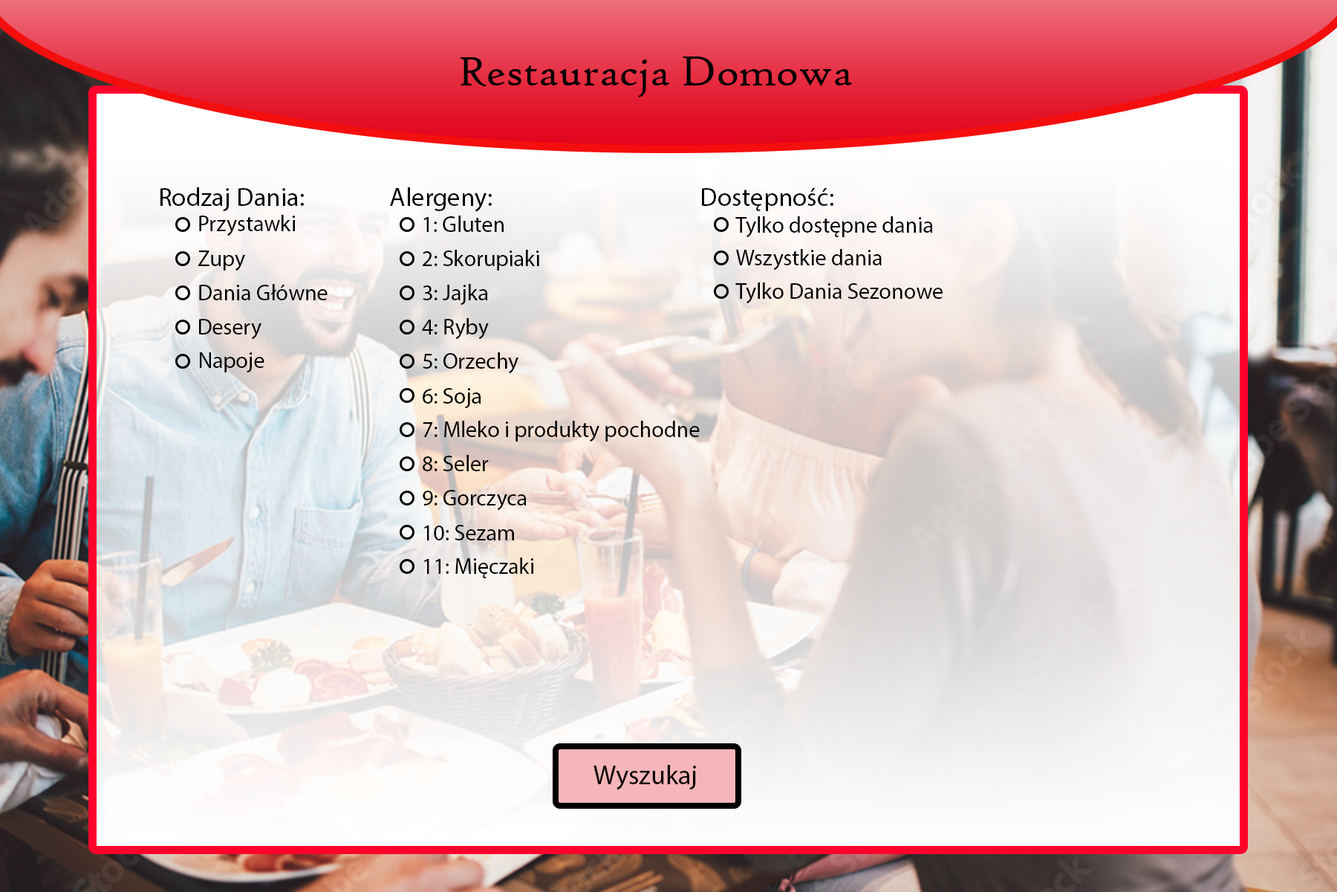
<style>
.page{position:relative;width:1337px;height:892px}
.page>*{position:absolute;margin:0}
.t1{font:44.6px "HighTowerText-Reg";color:#000000}
.t2{font:26px "MyriadPro-Regular";color:#000000}
.t3{font:22.3px "MyriadPro-Regular";color:#000000}
.t4{font:26.7px "MyriadPro-Regular";color:#010000}
</style>
<div class="page">
<p class="t1" style="left:460px;top:56px;width:392px;height:41px">Restauracja Domowa</p>
<p class="t2" style="left:160px;top:187px;width:144px;height:24px">Rodzaj Dania:</p>
<p class="t2" style="left:390px;top:187px;width:102px;height:25px">Alergeny:</p>
<p class="t2" style="left:702px;top:188px;width:132px;height:23px">Dostępność:</p>
<p class="t3" style="left:199px;top:215px;width:96px;height:21px">Przystawki</p>
<p class="t3" style="left:424px;top:215px;width:80px;height:17px">1: Gluten</p>
<p class="t3" style="left:736px;top:216px;width:197px;height:22px">Tylko dostępne dania</p>
<p class="t3" style="left:198px;top:250px;width:47px;height:21px">Zupy</p>
<p class="t3" style="left:423px;top:250px;width:116px;height:20px">2: Skorupiaki</p>
<p class="t3" style="left:736px;top:249px;width:146px;height:21px">Wszystkie dania</p>
<p class="t3" style="left:199px;top:284px;width:129px;height:16px">Dania Główne</p>
<p class="t3" style="left:423px;top:284px;width:65px;height:21px">3: Jajka</p>
<p class="t3" style="left:736px;top:282px;width:207px;height:22px">Tylko Dania Sezonowe</p>
<p class="t3" style="left:199px;top:319px;width:63px;height:21px">Desery</p>
<p class="t3" style="left:422px;top:318px;width:67px;height:22px">4: Ryby</p>
<p class="t3" style="left:200px;top:352px;width:65px;height:20px">Napoje</p>
<p class="t3" style="left:423px;top:352px;width:96px;height:22px">5: Orzechy</p>
<p class="t3" style="left:423px;top:388px;width:58px;height:20px">6: Soja</p>
<p class="t3" style="left:423px;top:421px;width:277px;height:21px">7: Mleko i produkty pochodne</p>
<p class="t3" style="left:423px;top:455px;width:66px;height:16px">8: Seler</p>
<p class="t3" style="left:423px;top:490px;width:104px;height:20px">9: Gorczyca</p>
<p class="t3" style="left:424px;top:525px;width:90px;height:15px">10: Sezam</p>
<p class="t3" style="left:424px;top:557px;width:109px;height:21px">11: Mięczaki</p>
<p class="t4" style="left:594px;top:765px;width:102px;height:25px">Wyszukaj</p>
</div>
